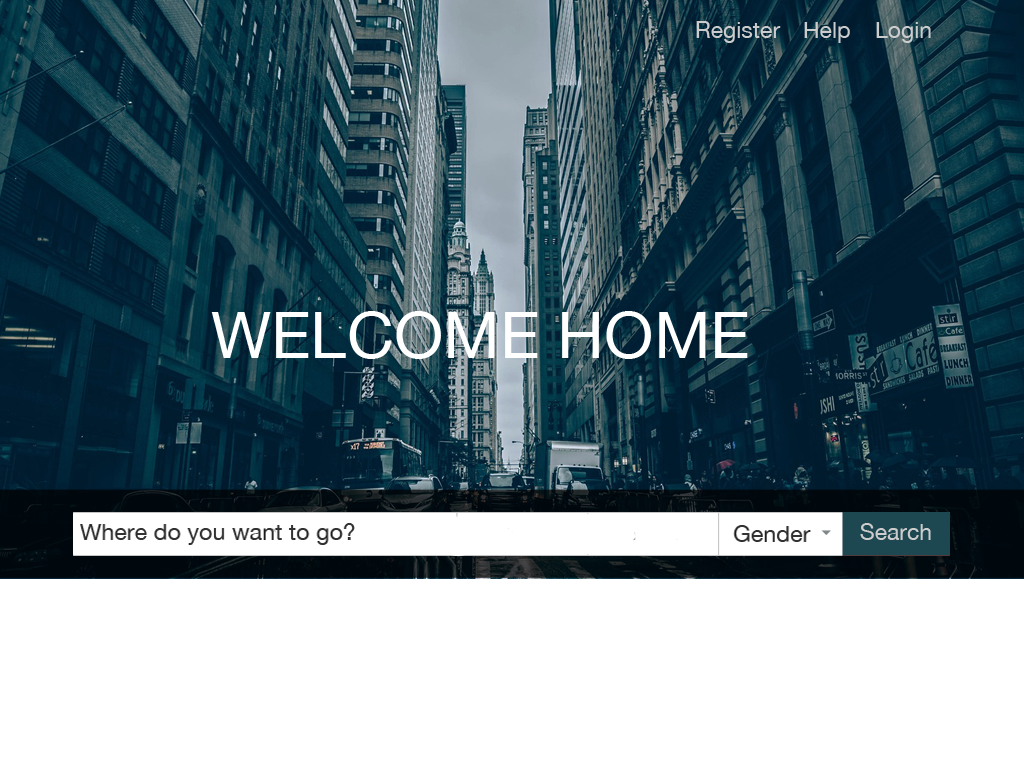
<style>
.page{position:relative;width:1024px;height:768px;background:#ffffff}
.page>*{position:absolute;margin:0}
.t1{font:23px "HelveticaNeue";color:#cccccc}
.t2{font:65px "HelveticaNeue";color:#ffffff}
</style>
<div class="page">
<p class="t1" style="left:696px;top:21px;width:235px;height:22px">Register Help Login</p>
<p class="t2" style="left:211px;top:311px;width:537px;height:48px">WELCOME HOME</p>
<p class="t1" style="left:860px;top:523px;width:71px;height:17px">Search</p>
</div>
